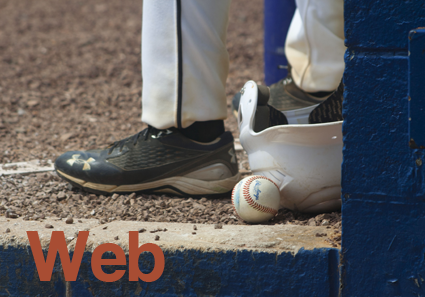
<style>
.page{position:relative;width:425px;height:297px}
.page>*{position:absolute;margin:0}
.t1{font:75px "CoolveticaRg-Regular";color:#a84d33}
</style>
<div class="page">
<p class="t1" style="left:26px;top:231px;width:139px;height:51px">Web</p>
</div>
